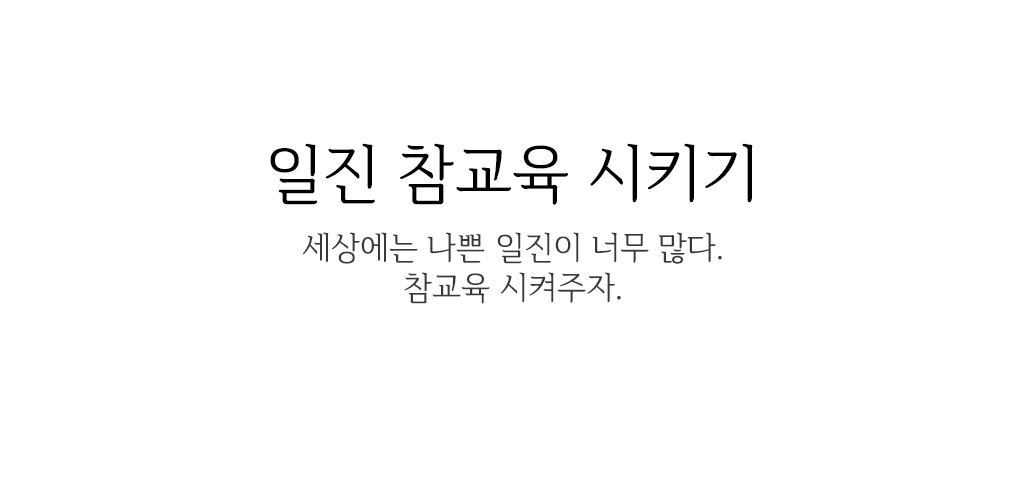
<style>
.page{position:relative;width:1024px;height:500px;background:#ffffff}
.page>*{position:absolute;margin:0}
.t1{font:63.9px "IropkeBatangM";color:#000000}
.t2{font:32.4px/40.5px "IropkeBatangM";color:#393939}
</style>
<div class="page">
<p class="t1" style="left:270px;top:143px;width:483px;height:62px">일진 참교육 시키기</p>
<p class="t2" style="left:303px;top:232px;width:419px;height:72px;text-align:center">세상에는 나쁜 일진이 너무 많다.<br>참교육 시켜주자.</p>
</div>
